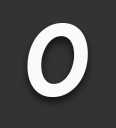
<style>
.page{position:relative;width:116px;height:128px;background:#333333}
.page>*{position:absolute;margin:0}
.t1{font:102px "ProductSans-BoldItalic";color:#fafafa}
</style>
<div class="page">
<p class="t1" style="left:27px;top:23px;width:61px;height:74px">0</p>
</div>
